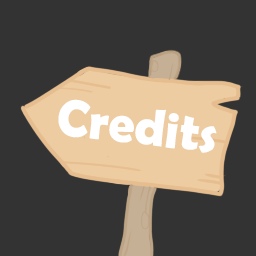
<style>
.page{position:relative;width:256px;height:256px;background:#333333}
.page>*{position:absolute;margin:0}
.t1{font:52px "BerlinSansFBDemi-Bold";color:#ffffff}
</style>
<div class="page">
<p class="t1" style="left:58px;top:99px;width:159px;height:54px;rotate:7deg">Credits</p>
</div>
